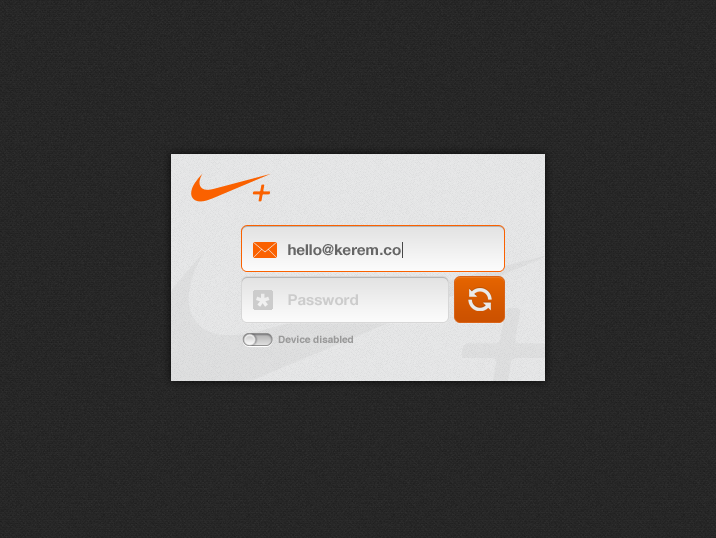
<style>
.page{position:relative;width:716px;height:538px}
.page>*{position:absolute;margin:0}
.t1{font:15px "HelveticaNeueLTStd-Bd";color:#666666}
.t2{font:15px "HelveticaNeueLTStd-Bd";color:#cccccc}
.t3{font:10px "Helvetica-Bold";color:#999999}
</style>
<div class="page">
<p class="t1" style="left:288px;top:244px;width:113px;height:12px">hello@kerem.co</p>
<p class="t2" style="left:288px;top:294px;width:70px;height:12px">Password</p>
<p class="t3" style="left:278px;top:335px;width:75px;height:8px">Device disabled</p>
</div>
